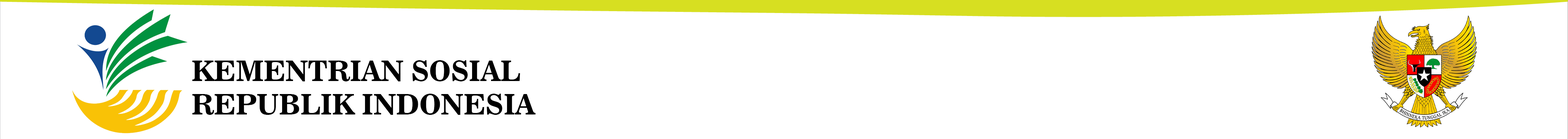
<style>
.page{position:relative;width:1568px;height:139px;background:#ffffff}
.page>*{position:absolute;margin:0}
.t1{font:27.9px "News706BT-BoldC";color:#000000}
</style>
<div class="page">
<p class="t1" style="left:192px;top:60px;width:344px;height:55px">KEMENTRIAN SOSIAL<br>REPUBLIK INDONESIA</p>
</div>
